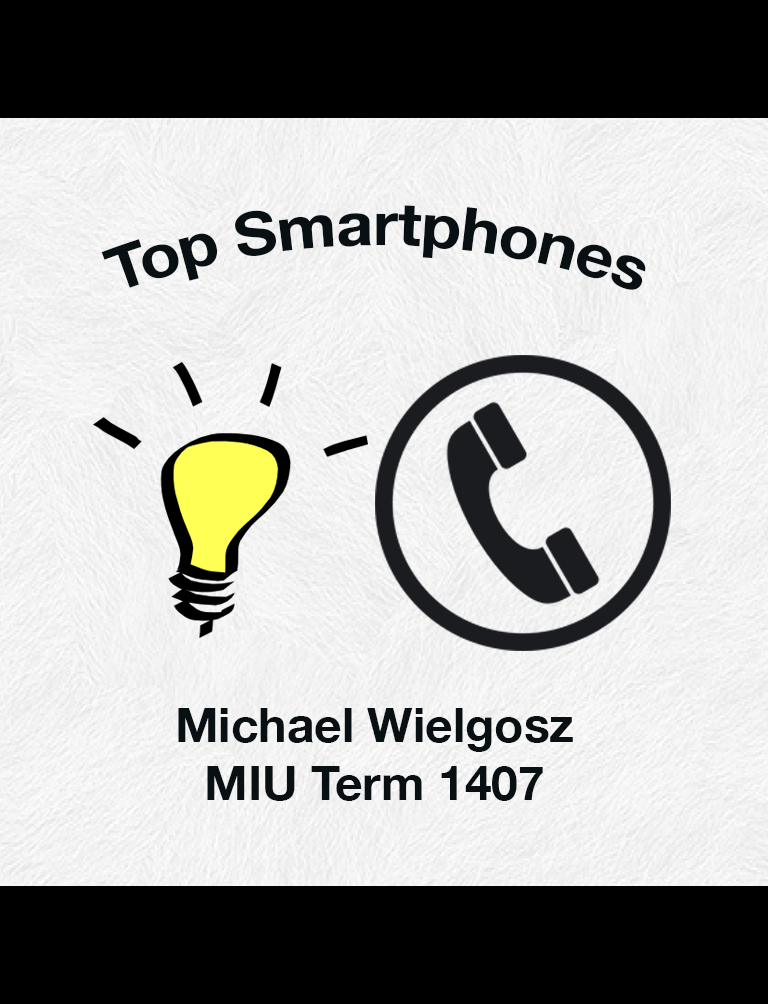
<style>
.page{position:relative;width:768px;height:1004px;background:#000000}
.page>*{position:absolute;margin:0}
.t1{font:60px "HelveticaNeue-Bold";color:#091013}
.t2{font:48px "HelveticaNeue-Bold";color:#091013}
</style>
<div class="page">
<p class="t1" style="left:101px;top:205px;width:545px;height:85px">Top Smartphones</p>
<p class="t2" style="left:178px;top:708px;width:395px;height:93px;text-align:center">Michael Wielgosz<br>MIU Term 1407</p>
</div>
